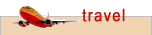
<style>
.page{position:relative;width:152px;height:35px;background:#f1d5b2}
.page>*{position:absolute;margin:0}
.t1{font:17px "ArialNarrow";letter-spacing:0.075em;color:#bd170a;font-weight:bold}
</style>
<div class="page">
<p class="t1" style="left:82px;top:8px;width:43px;height:14px">travel</p>
</div>
